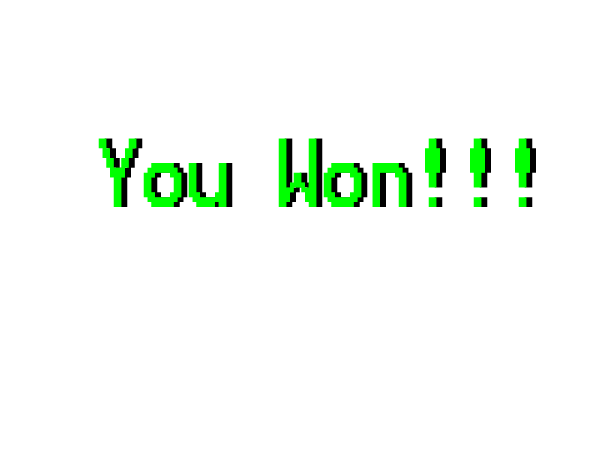
<style>
.page{position:relative;width:600px;height:450px;background:#ffffff}
.page>*{position:absolute;margin:0}
.t1{font:78.4px "Terminal";color:#00ff00;scale:0.77 1}
.t2{font:78.4px "Terminal";scale:0.77 1}
</style>
<div class="page">
<p class="t1" style="left:98px;top:138px;width:432px;height:69px">You Won!!!</p>
<p class="t2" style="left:104px;top:138px;width:432px;height:69px">You Won!!!</p>
</div>
